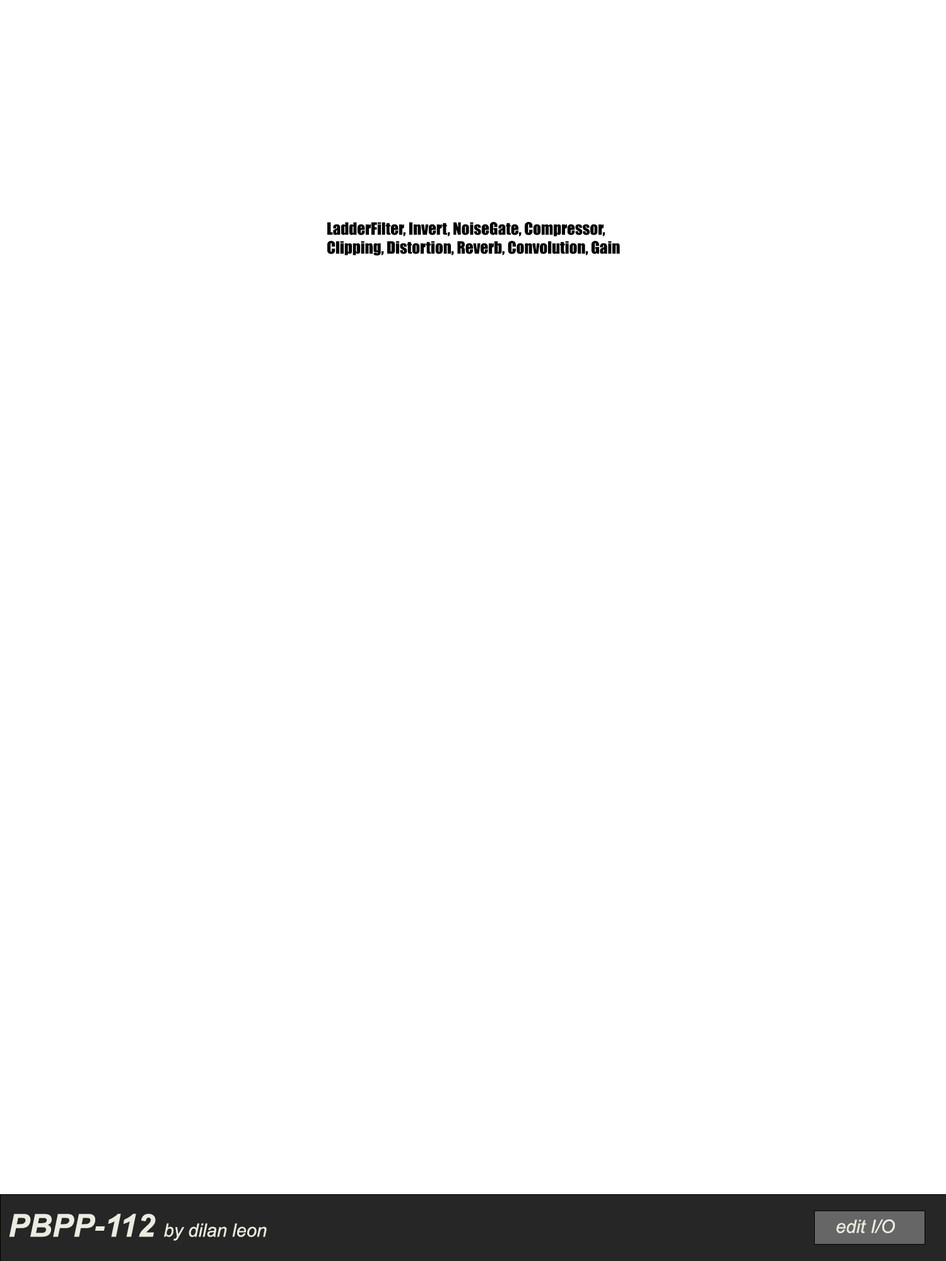
<style>
.page{position:relative;width:946px;height:1261px;background:#ffffff}
.page>*{position:absolute;margin:0}
.t1{font:15.8px "Impact";color:#000000}
.t2{font:18.4px "Arial-ItalicMT";color:#e9ecdf}
.t3{font:31.5px "Arial-BoldItalicMT";color:#e9ecdf}
</style>
<div class="page">
<p class="t1" style="left:327px;top:222px;width:293px;height:34px">LadderFilter, Invert, NoiseGate, Compressor, <br>Clipping, Distortion, Reverb, Convolution, Gain</p>
<p class="t2" style="left:9px;top:1214px;width:258px;height:27px"><span class="t3">PBPP-112 </span>by dilan leon</p>
</div>
